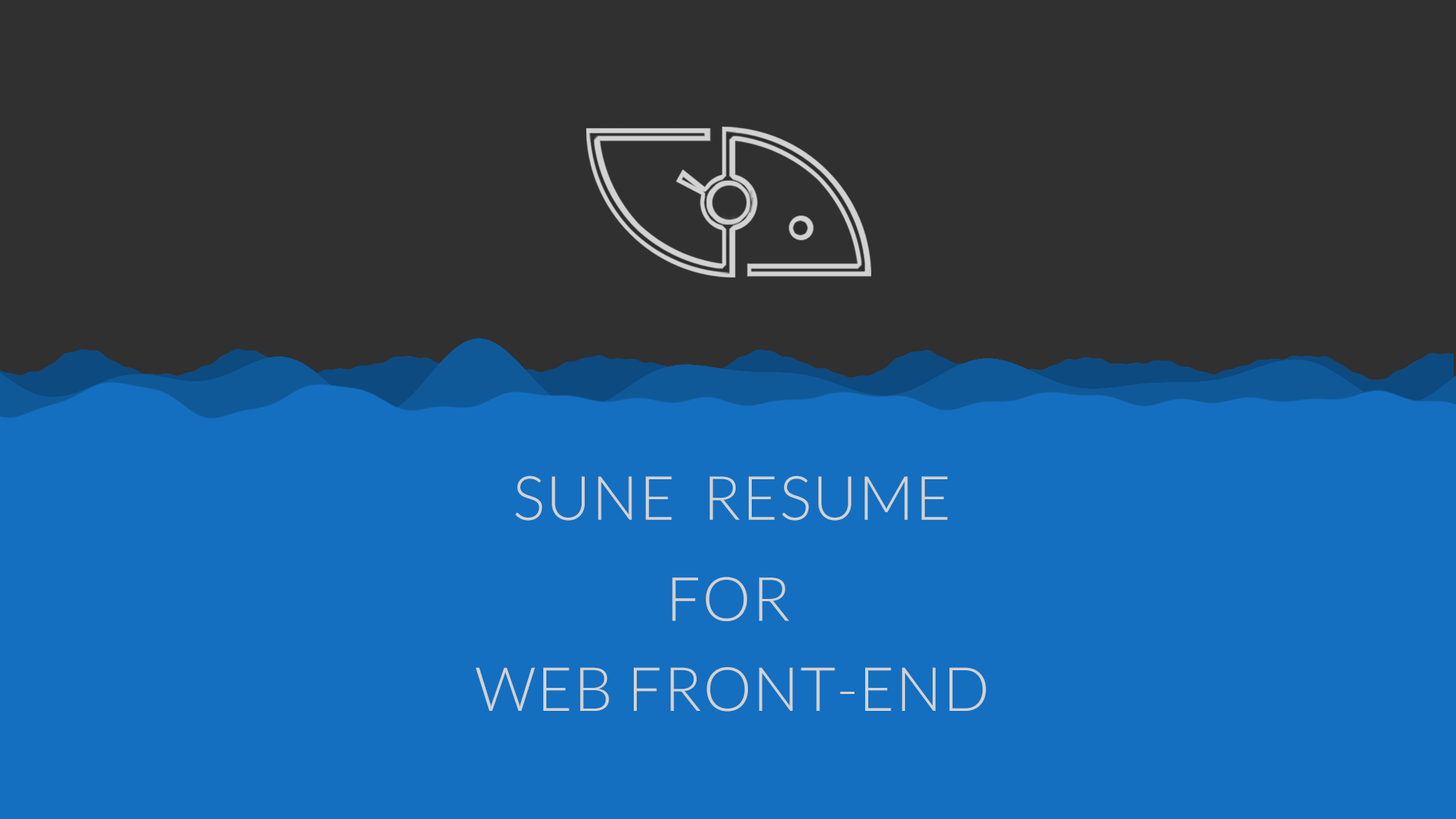
<style>
.page{position:relative;width:1456px;height:819px;background:#146fc0}
.page>*{position:absolute;margin:0}
.t1{font:61px "Lato-Light";letter-spacing:0.02em;color:#d2d2d2}
</style>
<div class="page">
<p class="t1" style="left:515px;top:475px;width:433px;height:46px">SUNE  RESUME</p>
<p class="t1" style="left:672px;top:576px;width:118px;height:45px">FOR</p>
<p class="t1" style="left:476px;top:667px;width:511px;height:44px">WEB FRONT-END</p>
</div>
